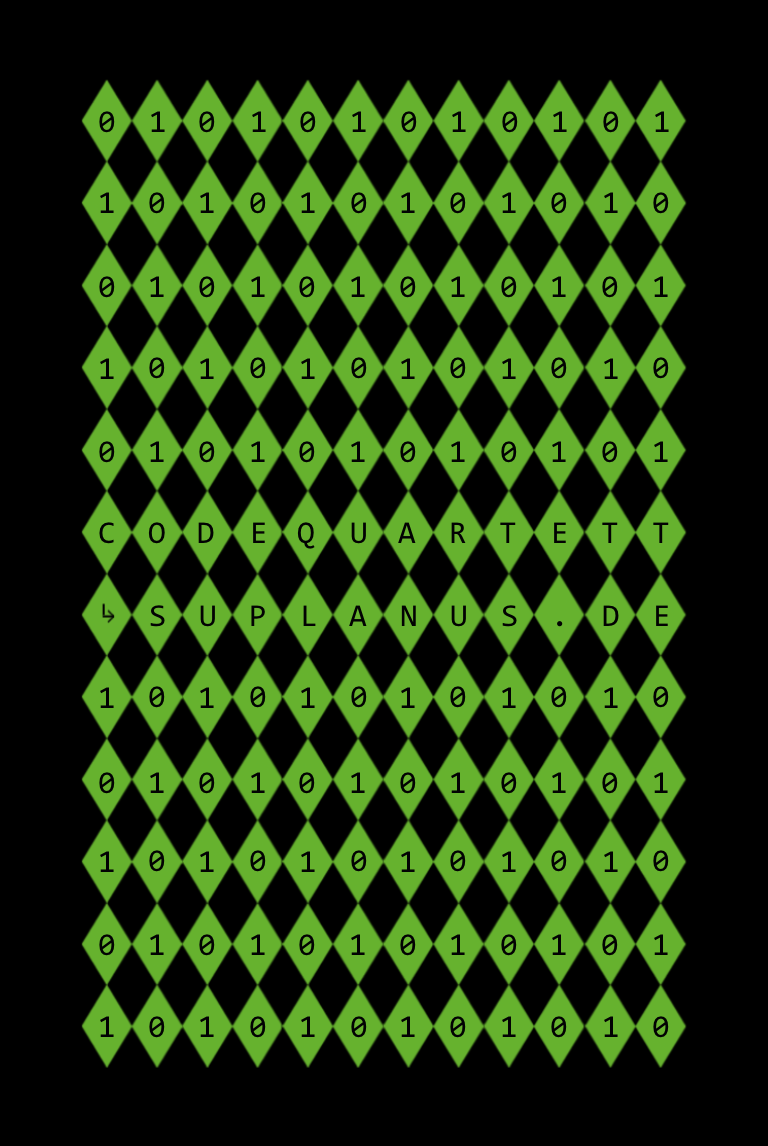
<style>
.page{position:relative;width:768px;height:1146px;background:#000000}
.page>*{position:absolute;margin:0}
.t1{font:32px "Consolas";color:#020203}
</style>
<div class="page">
<p class="t1" style="left:99px;top:111px;width:16px;height:22px">0</p>
<p class="t1" style="left:151px;top:111px;width:14px;height:21px">1</p>
<p class="t1" style="left:199px;top:111px;width:16px;height:22px">0</p>
<p class="t1" style="left:252px;top:111px;width:14px;height:21px">1</p>
<p class="t1" style="left:300px;top:111px;width:16px;height:22px">0</p>
<p class="t1" style="left:352px;top:111px;width:14px;height:21px">1</p>
<p class="t1" style="left:401px;top:111px;width:16px;height:22px">0</p>
<p class="t1" style="left:452px;top:111px;width:14px;height:21px">1</p>
<p class="t1" style="left:502px;top:111px;width:16px;height:22px">0</p>
<p class="t1" style="left:553px;top:111px;width:14px;height:21px">1</p>
<p class="t1" style="left:603px;top:111px;width:16px;height:22px">0</p>
<p class="t1" style="left:655px;top:111px;width:14px;height:21px">1</p>
<p class="t1" style="left:100px;top:192px;width:14px;height:21px">1</p>
<p class="t1" style="left:149px;top:192px;width:16px;height:22px">0</p>
<p class="t1" style="left:200px;top:192px;width:14px;height:21px">1</p>
<p class="t1" style="left:250px;top:192px;width:16px;height:22px">0</p>
<p class="t1" style="left:301px;top:192px;width:14px;height:21px">1</p>
<p class="t1" style="left:351px;top:192px;width:16px;height:22px">0</p>
<p class="t1" style="left:401px;top:192px;width:14px;height:21px">1</p>
<p class="t1" style="left:450px;top:192px;width:16px;height:22px">0</p>
<p class="t1" style="left:502px;top:192px;width:14px;height:21px">1</p>
<p class="t1" style="left:551px;top:192px;width:16px;height:22px">0</p>
<p class="t1" style="left:604px;top:192px;width:14px;height:21px">1</p>
<p class="t1" style="left:653px;top:192px;width:16px;height:22px">0</p>
<p class="t1" style="left:99px;top:276px;width:16px;height:22px">0</p>
<p class="t1" style="left:150px;top:276px;width:14px;height:21px">1</p>
<p class="t1" style="left:199px;top:276px;width:16px;height:22px">0</p>
<p class="t1" style="left:251px;top:276px;width:14px;height:21px">1</p>
<p class="t1" style="left:299px;top:276px;width:16px;height:22px">0</p>
<p class="t1" style="left:351px;top:276px;width:14px;height:21px">1</p>
<p class="t1" style="left:400px;top:276px;width:16px;height:22px">0</p>
<p class="t1" style="left:451px;top:276px;width:14px;height:21px">1</p>
<p class="t1" style="left:501px;top:276px;width:16px;height:22px">0</p>
<p class="t1" style="left:552px;top:276px;width:14px;height:21px">1</p>
<p class="t1" style="left:602px;top:276px;width:16px;height:22px">0</p>
<p class="t1" style="left:654px;top:276px;width:14px;height:21px">1</p>
<p class="t1" style="left:100px;top:358px;width:14px;height:21px">1</p>
<p class="t1" style="left:149px;top:357px;width:16px;height:22px">0</p>
<p class="t1" style="left:200px;top:358px;width:14px;height:21px">1</p>
<p class="t1" style="left:250px;top:357px;width:16px;height:22px">0</p>
<p class="t1" style="left:301px;top:358px;width:14px;height:21px">1</p>
<p class="t1" style="left:351px;top:357px;width:16px;height:22px">0</p>
<p class="t1" style="left:401px;top:358px;width:14px;height:21px">1</p>
<p class="t1" style="left:450px;top:357px;width:16px;height:22px">0</p>
<p class="t1" style="left:502px;top:358px;width:14px;height:21px">1</p>
<p class="t1" style="left:551px;top:357px;width:16px;height:22px">0</p>
<p class="t1" style="left:604px;top:358px;width:14px;height:21px">1</p>
<p class="t1" style="left:653px;top:357px;width:16px;height:22px">0</p>
<p class="t1" style="left:99px;top:441px;width:16px;height:22px">0</p>
<p class="t1" style="left:150px;top:441px;width:14px;height:21px">1</p>
<p class="t1" style="left:199px;top:441px;width:16px;height:22px">0</p>
<p class="t1" style="left:251px;top:441px;width:14px;height:21px">1</p>
<p class="t1" style="left:299px;top:441px;width:16px;height:22px">0</p>
<p class="t1" style="left:351px;top:441px;width:14px;height:21px">1</p>
<p class="t1" style="left:400px;top:441px;width:16px;height:22px">0</p>
<p class="t1" style="left:451px;top:441px;width:14px;height:21px">1</p>
<p class="t1" style="left:501px;top:441px;width:16px;height:22px">0</p>
<p class="t1" style="left:552px;top:441px;width:14px;height:21px">1</p>
<p class="t1" style="left:602px;top:441px;width:16px;height:22px">0</p>
<p class="t1" style="left:654px;top:441px;width:14px;height:21px">1</p>
<p class="t1" style="left:99px;top:522px;width:15px;height:22px">C</p>
<p class="t1" style="left:148px;top:522px;width:17px;height:22px">O</p>
<p class="t1" style="left:198px;top:522px;width:16px;height:21px">D</p>
<p class="t1" style="left:253px;top:522px;width:12px;height:21px">E</p>
<p class="t1" style="left:297px;top:522px;width:18px;height:27px">Q</p>
<p class="t1" style="left:351px;top:522px;width:15px;height:22px">U</p>
<p class="t1" style="left:398px;top:522px;width:18px;height:21px">A</p>
<p class="t1" style="left:451px;top:522px;width:15px;height:21px">R</p>
<p class="t1" style="left:500px;top:522px;width:16px;height:21px">T</p>
<p class="t1" style="left:554px;top:522px;width:12px;height:21px">E</p>
<p class="t1" style="left:602px;top:522px;width:16px;height:21px">T</p>
<p class="t1" style="left:653px;top:522px;width:16px;height:21px">T</p>
<p class="t1" style="left:150px;top:605px;width:15px;height:22px">S</p>
<p class="t1" style="left:200px;top:605px;width:15px;height:22px">U</p>
<p class="t1" style="left:251px;top:605px;width:14px;height:21px">P</p>
<p class="t1" style="left:303px;top:605px;width:13px;height:21px">L</p>
<p class="t1" style="left:349px;top:605px;width:18px;height:21px">A</p>
<p class="t1" style="left:401px;top:605px;width:15px;height:21px">N</p>
<p class="t1" style="left:451px;top:605px;width:15px;height:22px">U</p>
<p class="t1" style="left:502px;top:605px;width:15px;height:22px">S</p>
<p class="t1" style="left:603px;top:605px;width:16px;height:21px">D</p>
<p class="t1" style="left:656px;top:605px;width:12px;height:21px">E</p>
<p class="t1" style="left:557px;top:621px;width:6px;height:6px">.</p>
<p class="t1" style="left:100px;top:687px;width:14px;height:21px">1</p>
<p class="t1" style="left:149px;top:686px;width:16px;height:22px">0</p>
<p class="t1" style="left:200px;top:687px;width:14px;height:21px">1</p>
<p class="t1" style="left:250px;top:686px;width:16px;height:22px">0</p>
<p class="t1" style="left:301px;top:687px;width:14px;height:21px">1</p>
<p class="t1" style="left:351px;top:686px;width:16px;height:22px">0</p>
<p class="t1" style="left:401px;top:687px;width:14px;height:21px">1</p>
<p class="t1" style="left:450px;top:686px;width:16px;height:22px">0</p>
<p class="t1" style="left:502px;top:687px;width:14px;height:21px">1</p>
<p class="t1" style="left:551px;top:686px;width:16px;height:22px">0</p>
<p class="t1" style="left:604px;top:687px;width:14px;height:21px">1</p>
<p class="t1" style="left:653px;top:686px;width:16px;height:22px">0</p>
<p class="t1" style="left:99px;top:772px;width:16px;height:22px">0</p>
<p class="t1" style="left:150px;top:772px;width:14px;height:21px">1</p>
<p class="t1" style="left:199px;top:772px;width:16px;height:22px">0</p>
<p class="t1" style="left:251px;top:772px;width:14px;height:21px">1</p>
<p class="t1" style="left:299px;top:772px;width:16px;height:22px">0</p>
<p class="t1" style="left:351px;top:772px;width:14px;height:21px">1</p>
<p class="t1" style="left:400px;top:772px;width:16px;height:22px">0</p>
<p class="t1" style="left:451px;top:772px;width:14px;height:21px">1</p>
<p class="t1" style="left:501px;top:772px;width:16px;height:22px">0</p>
<p class="t1" style="left:552px;top:772px;width:14px;height:21px">1</p>
<p class="t1" style="left:602px;top:772px;width:16px;height:22px">0</p>
<p class="t1" style="left:654px;top:772px;width:14px;height:21px">1</p>
<p class="t1" style="left:100px;top:851px;width:14px;height:21px">1</p>
<p class="t1" style="left:149px;top:850px;width:16px;height:22px">0</p>
<p class="t1" style="left:200px;top:851px;width:14px;height:21px">1</p>
<p class="t1" style="left:250px;top:850px;width:16px;height:22px">0</p>
<p class="t1" style="left:301px;top:851px;width:14px;height:21px">1</p>
<p class="t1" style="left:351px;top:850px;width:16px;height:22px">0</p>
<p class="t1" style="left:401px;top:851px;width:14px;height:21px">1</p>
<p class="t1" style="left:450px;top:850px;width:16px;height:22px">0</p>
<p class="t1" style="left:502px;top:851px;width:14px;height:21px">1</p>
<p class="t1" style="left:551px;top:850px;width:16px;height:22px">0</p>
<p class="t1" style="left:604px;top:851px;width:14px;height:21px">1</p>
<p class="t1" style="left:653px;top:850px;width:16px;height:22px">0</p>
<p class="t1" style="left:99px;top:934px;width:16px;height:22px">0</p>
<p class="t1" style="left:150px;top:934px;width:14px;height:21px">1</p>
<p class="t1" style="left:199px;top:934px;width:16px;height:22px">0</p>
<p class="t1" style="left:251px;top:934px;width:14px;height:21px">1</p>
<p class="t1" style="left:299px;top:934px;width:16px;height:22px">0</p>
<p class="t1" style="left:351px;top:934px;width:14px;height:21px">1</p>
<p class="t1" style="left:400px;top:934px;width:16px;height:22px">0</p>
<p class="t1" style="left:451px;top:934px;width:14px;height:21px">1</p>
<p class="t1" style="left:501px;top:934px;width:16px;height:22px">0</p>
<p class="t1" style="left:552px;top:934px;width:14px;height:21px">1</p>
<p class="t1" style="left:602px;top:934px;width:16px;height:22px">0</p>
<p class="t1" style="left:654px;top:934px;width:14px;height:21px">1</p>
<p class="t1" style="left:100px;top:1016px;width:14px;height:21px">1</p>
<p class="t1" style="left:149px;top:1016px;width:16px;height:22px">0</p>
<p class="t1" style="left:200px;top:1016px;width:14px;height:21px">1</p>
<p class="t1" style="left:250px;top:1016px;width:16px;height:22px">0</p>
<p class="t1" style="left:301px;top:1016px;width:14px;height:21px">1</p>
<p class="t1" style="left:351px;top:1016px;width:16px;height:22px">0</p>
<p class="t1" style="left:401px;top:1016px;width:14px;height:21px">1</p>
<p class="t1" style="left:450px;top:1016px;width:16px;height:22px">0</p>
<p class="t1" style="left:502px;top:1016px;width:14px;height:21px">1</p>
<p class="t1" style="left:551px;top:1016px;width:16px;height:22px">0</p>
<p class="t1" style="left:604px;top:1016px;width:14px;height:21px">1</p>
<p class="t1" style="left:653px;top:1016px;width:16px;height:22px">0</p>
</div>
